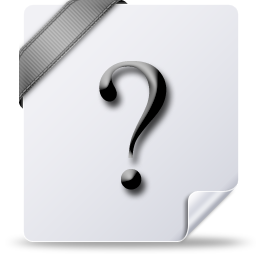
<style>
.page{position:relative;width:256px;height:256px}
.page>*{position:absolute;margin:0}
.t1{font:240px "Kokila"}
</style>
<div class="page">
<p class="t1" style="left:99px;top:61px;width:68px;height:129px">?</p>
</div>
